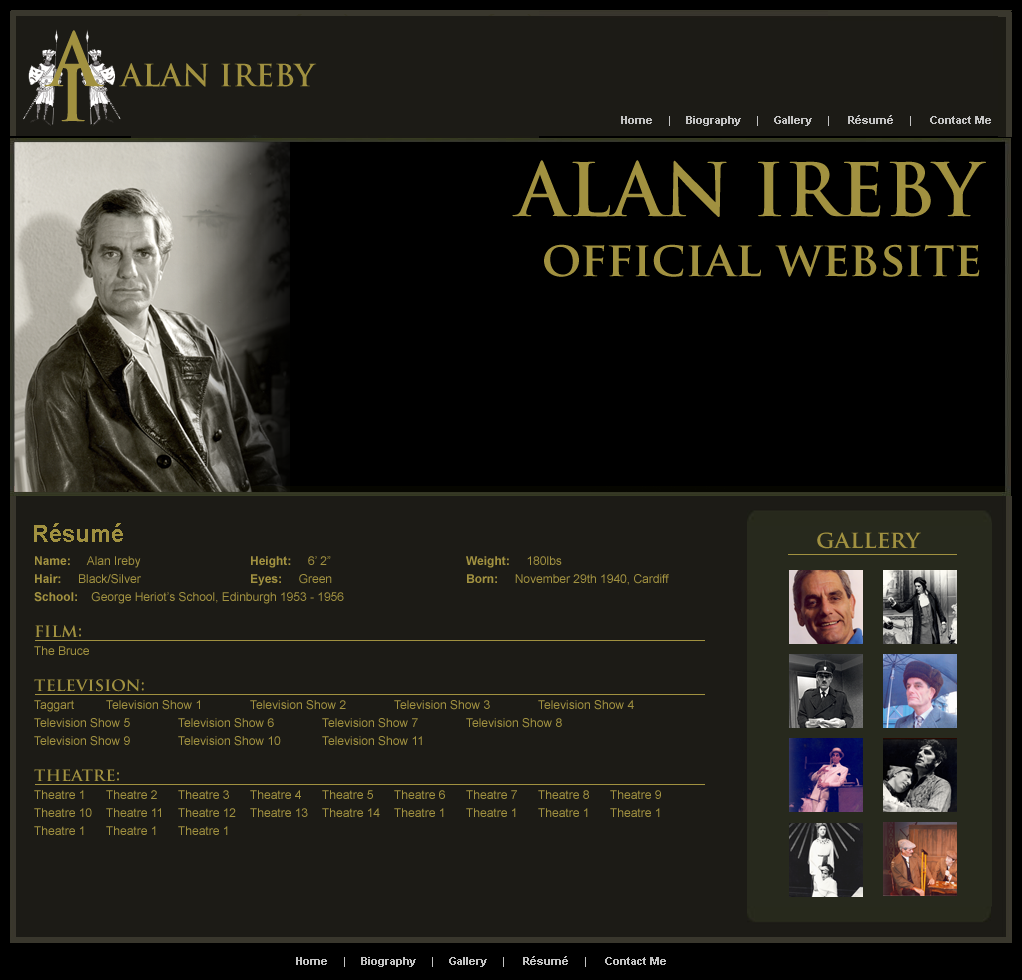
<style>
.page{position:relative;width:1022px;height:980px;background:#1c1b16}
.page>*{position:absolute;margin:0}
.t1{font:72px "TrajanPro-Bold";color:#a19140}
.t2{font:30px "TrajanPro-Bold";color:#a19140}
.t3{font:11px "Arial-BoldMT";color:#c3c3c3}
.t4{font:48px/60px "TrajanPro-Bold";color:#a19140}
.t5{font:72px/72px "TrajanPro-Bold";color:#a19140}
.t6{font:24px "Arial-BoldMT";color:#a19140}
.t7{font:24px "TrajanPro-Bold";color:#a19140}
.t8{font:12px/18px "ArialMT";color:#a19140}
.t9{font:12px/18px "Arial-BoldMT";color:#a19140}
.t10{font:18px/18px "TrajanPro-Bold";color:#a19140}
</style>
<div class="page">
<p class="t1" style="left:44px;top:30px;width:60px;height:57px">A</p>
<p class="t2" style="left:119px;top:63px;width:198px;height:24px">ALAN IREBY</p>
<p class="t1" style="left:61px;top:66px;width:24px;height:56px">I</p>
<p class="t3" style="left:621px;top:115px;width:370px;height:11px">Home     |     Biography     |     Gallery     |      Résumé     |      Contact Me</p>
<p class="t4" style="left:512px;top:160px;width:474px;height:117px;text-align:right"><span class="t5">ALAN IREBY<br></span>official website</p>
<p class="t6" style="left:34px;top:523px;width:89px;height:19px">Résumé</p>
<p class="t7" style="left:817px;top:532px;width:104px;height:17px">gallery</p>
<p class="t8" style="left:34px;top:556px;width:635px;height:279px"><span class="t9">Name:</span>     Alan Ireby    <span class="t9">Height:</span>     6’ 2”    <span class="t9">Weight:</span>     180lbs<br><span class="t9">Hair:</span>     Black/Silver    <span class="t9">Eyes:</span>     Green    <span class="t9">Born:</span>     November 29th 1940, Cardiff<br><span class="t9">School:</span>    George Heriot’s School, Edinburgh 1953 - 1956<br><br><span class="t10">film:<br></span>The Bruce<br><br><span class="t10">television:<br></span>Taggart Television Show 1  Television Show 2  Television Show 3  Television Show 4<br>Television Show 5  Television Show 6  Television Show 7  Television Show 8<br>Television Show 9  Television Show 10  Television Show 11<br><br><span class="t10">theatre:<br></span>Theatre 1 Theatre 2 Theatre 3 Theatre 4 Theatre 5 Theatre 6 Theatre 7 Theatre 8 Theatre 9<br>Theatre 10 Theatre 11 Theatre 12 Theatre 13 Theatre 14 Theatre 1 Theatre 1 Theatre 1 Theatre 1<br>Theatre 1 Theatre 1 Theatre 1</p>
<p class="t3" style="left:296px;top:956px;width:370px;height:11px">Home     |     Biography     |     Gallery     |      Résumé     |      Contact Me</p>
</div>
